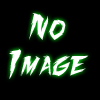
<style>
.page{position:relative;width:100px;height:100px;background:#000000}
.page>*{position:absolute;margin:0}
.t1{font:30px "FightingSpiritTBS";color:#ffffff}
</style>
<div class="page">
<p class="t1" style="left:9px;top:13px;width:80px;height:66px;text-align:center">No<br>Image</p>
</div>
